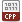
<style>
.page{position:relative;width:22px;height:22px;background:#ffffff}
.page>*{position:absolute;margin:0}
.t1{font:8px "Pixelated";color:#ffffff}
</style>
<div class="page">
<p class="t1" style="left:5px;top:14px;width:11px;height:5px">CPP</p>
</div>
